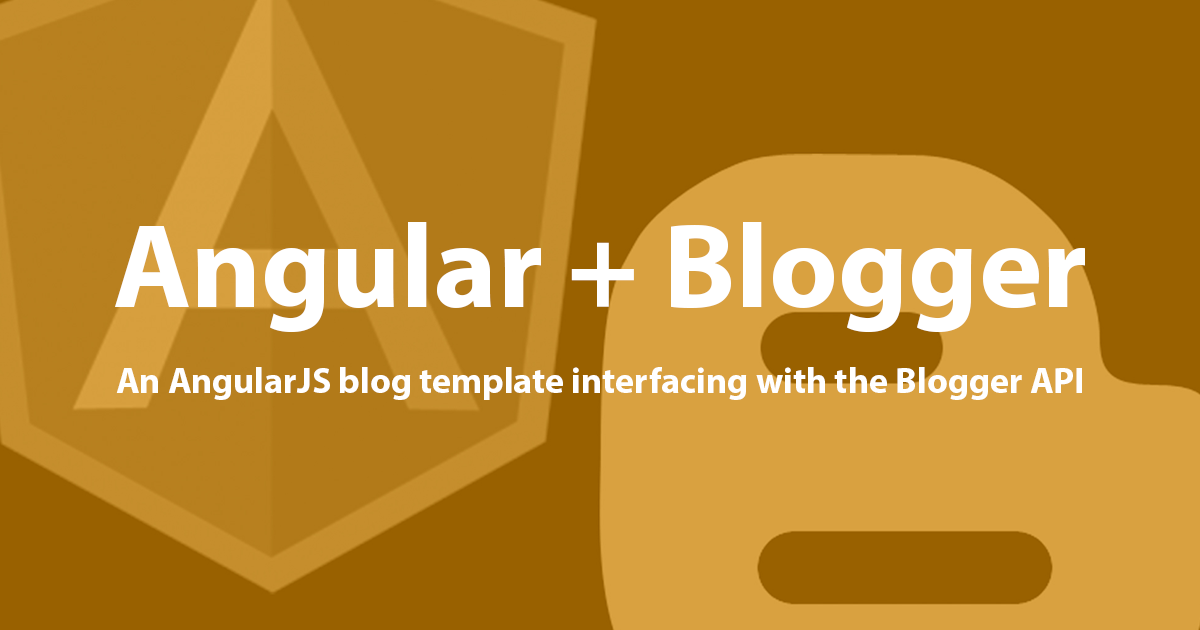
<style>
.page{position:relative;width:1200px;height:630px;background:#996100}
.page>*{position:absolute;margin:0}
.t1{font:36px "MyriadPro-Bold";color:#ffffff}
.t2{font:120px "MyriadPro-Bold";color:#ffffff}
</style>
<div class="page">
<p class="t1" style="left:115px;top:222px;width:970px;height:178px;text-align:center"><span class="t2">Angular + Blogger<br></span><br>An AngularJS blog template interfacing with the Blogger API</p>
</div>
